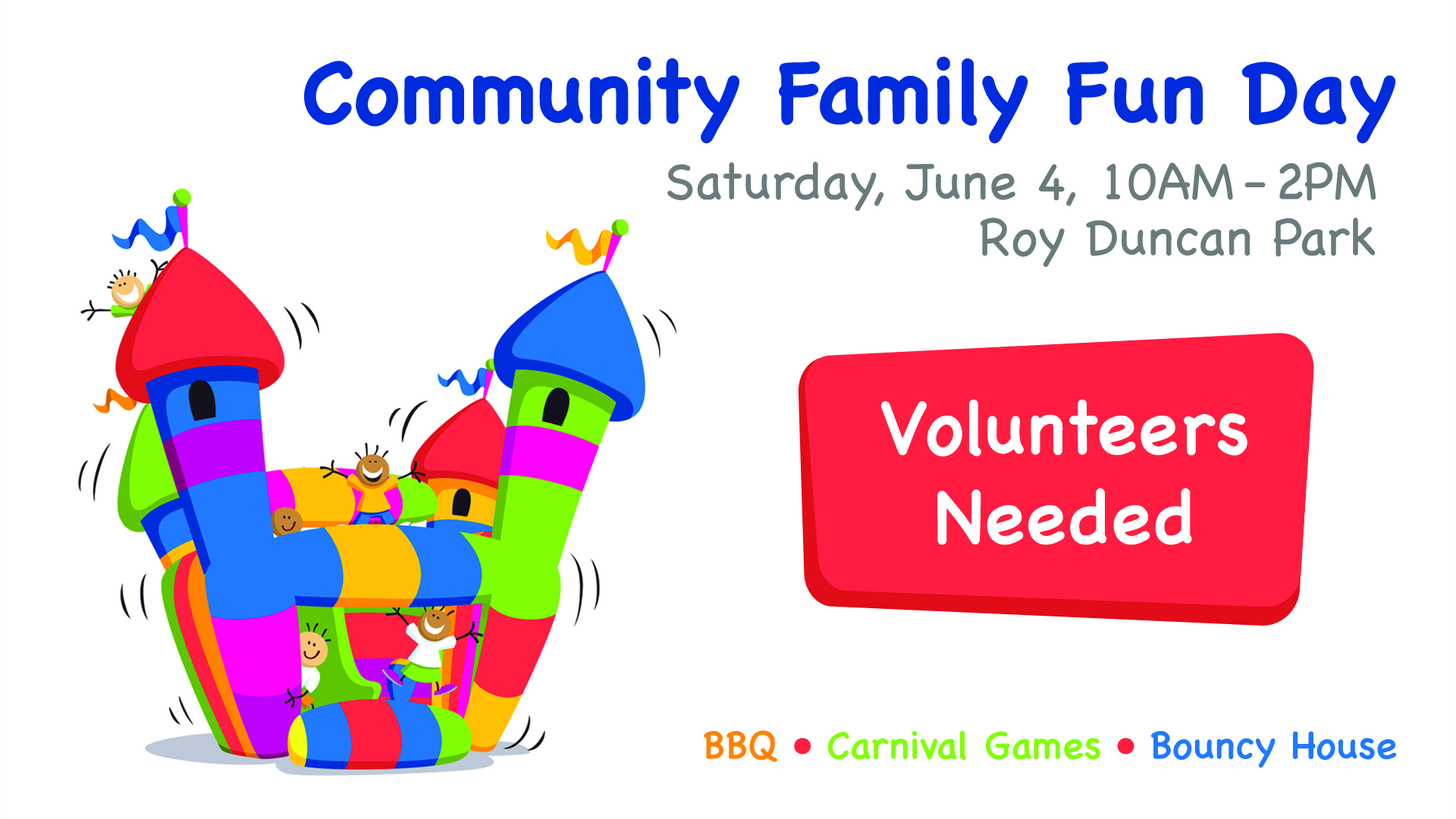
<style>
.page{position:relative;width:1456px;height:819px;background:#ffffff}
.page>*{position:absolute;margin:0}
.t1{font:87.1px "ChalkboardSE-Bold";color:#002bde}
.t2{font:52.2px/77.7px "ChalkboardSE-Light";color:#687b7c}
.t3{font:52.2px/77.7px "ChalkboardSE-Light";letter-spacing:-0.22em;color:#687b7c}
.t4{font:52.2px/56px "ChalkboardSE-Light";color:#687b7c}
.t5{font:39.8px/56px "ChalkboardSE-Regular";color:#ff8100}
.t6{font:39.8px/56px "ChalkboardSE-Regular";color:#ff1d40}
.t7{font:39.8px/56px "ChalkboardSE-Regular";color:#7fff03}
.t8{font:39.8px/56px "ChalkboardSE-Regular";color:#2079ff}
.t9{font:74.7px "ChalkboardSE-Light";color:#ffffff;font-weight:bold}
</style>
<div class="page">
<p class="t1" style="left:304px;top:56px;width:1093px;height:712px;text-align:right">Community Family Fun Day<br><span class="t2">Saturday, June 4, 10AM </span><span class="t3">- </span><span class="t2">2PM <br></span><span class="t4">Roy Duncan Park <br> <br></span><span class="t5"><br><br><br><br><br><br><br>BBQ </span><span class="t6">• </span><span class="t7">Carnival Games </span><span class="t6">• </span><span class="t8">Bouncy House</span></p>
<p class="t9" style="left:880px;top:399px;width:367px;height:146px;text-align:center">Volunteers<br>Needed</p>
</div>
